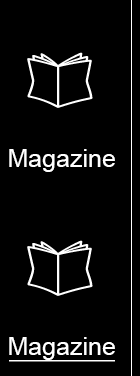
<style>
.page{position:relative;width:140px;height:376px;background:#000000}
.page>*{position:absolute;margin:0}
.t1{font:25px "ArialMT";color:#ffffff}
</style>
<div class="page">
<p class="t1" style="left:9px;top:149px;width:106px;height:23px">Magazine</p>
<p class="t1" style="left:9px;top:337px;width:106px;height:23px">Magazine</p>
</div>
